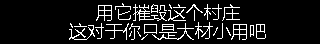
<style>
.page{position:relative;width:320px;height:44px;background:#000000}
.page>*{position:absolute;margin:0}
.t1{font:18px/19px "MicrosoftYaHei";color:#ffffff}
</style>
<div class="page">
<p class="t1" style="left:69px;top:3px;width:197px;height:37px;text-align:center">用它摧毁这个村庄<br>这对于你只是大材小用吧</p>
</div>
